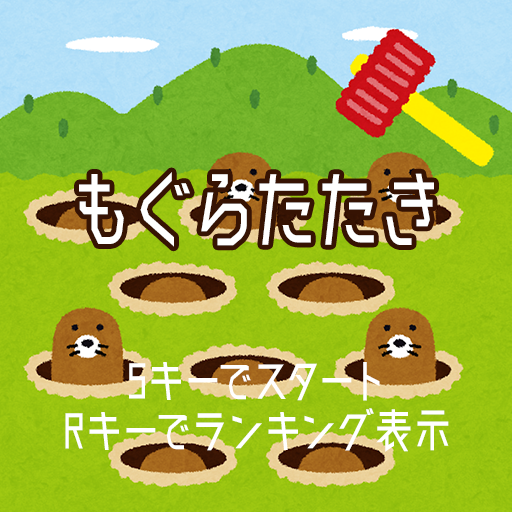
<style>
.page{position:relative;width:512px;height:512px}
.page>*{position:absolute;margin:0}
.t1{font:93.8px "Makinas-Flat-5";color:#ffffff;scale:0.8 1}
.t2{font:52.1px "Makinas-Flat-5";color:#ffffff;scale:0.8 1}
</style>
<div class="page">
<p class="t1" style="left:79px;top:172px;width:355px;height:75px">もぐらたたき</p>
<p class="t2" style="left:65px;top:362px;width:384px;height:90px;text-align:center">Sキーでスタート<br>Rキーでランキング表示</p>
</div>
